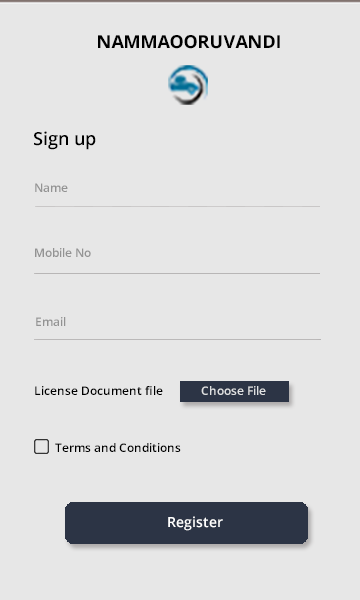
<style>
.page{position:relative;width:360px;height:600px;background:#e7e7e7}
.page>*{position:absolute;margin:0}
.t1{font:18px "OpenSans-Bold";color:#000000}
.t2{font:18px "OpenSans-Semibold";color:#000000}
.t3{font:12px "OpenSans-Semibold";color:#939393}
.t4{font:12px "OpenSans-Semibold";color:#000000}
.t5{font:12px "OpenSans-Semibold";color:#e0e1e2}
.t6{font:14px "OpenSans-Semibold";color:#ffffff}
</style>
<div class="page">
<p class="t1" style="left:98px;top:35px;width:182px;height:14px"><span class="t2">     </span>  NAMMAOORUVANDI</p>
<p class="t2" style="left:34px;top:131px;width:62px;height:19px">Sign up</p>
<p class="t3" style="left:35px;top:183px;width:33px;height:9px">Name</p>
<p class="t3" style="left:35px;top:248px;width:56px;height:9px">Mobile No</p>
<p class="t3" style="left:36px;top:317px;width:30px;height:9px">Email</p>
<p class="t4" style="left:35px;top:386px;width:128px;height:9px">License Document file</p>
<p class="t5" style="left:201px;top:386px;width:65px;height:9px">Choose File</p>
<p class="t4" style="left:55px;top:443px;width:126px;height:9px">Terms and Conditions</p>
<p class="t6" style="left:168px;top:516px;width:55px;height:15px">Register</p>
</div>
